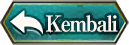
<style>
.page{position:relative;width:129px;height:45px}
.page>*{position:absolute;margin:0}
.t1{font:22px "RyuminPro-ExBold";letter-spacing:-0.08em;color:#fff6f2;scale:0.95 1}
</style>
<div class="page">
<p class="t1" style="left:46px;top:15px;width:72px;height:17px">Kembali</p>
</div>
